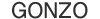
<style>
.page{position:relative;width:100px;height:19px;background:#ffffff}
.page>*{position:absolute;margin:0}
.t1{font:20px "BanglaSangamMN-Bold";color:#2f2f2f}
</style>
<div class="page">
<p class="t1" style="left:12px;top:1px;width:76px;height:18px">GONZO</p>
</div>
